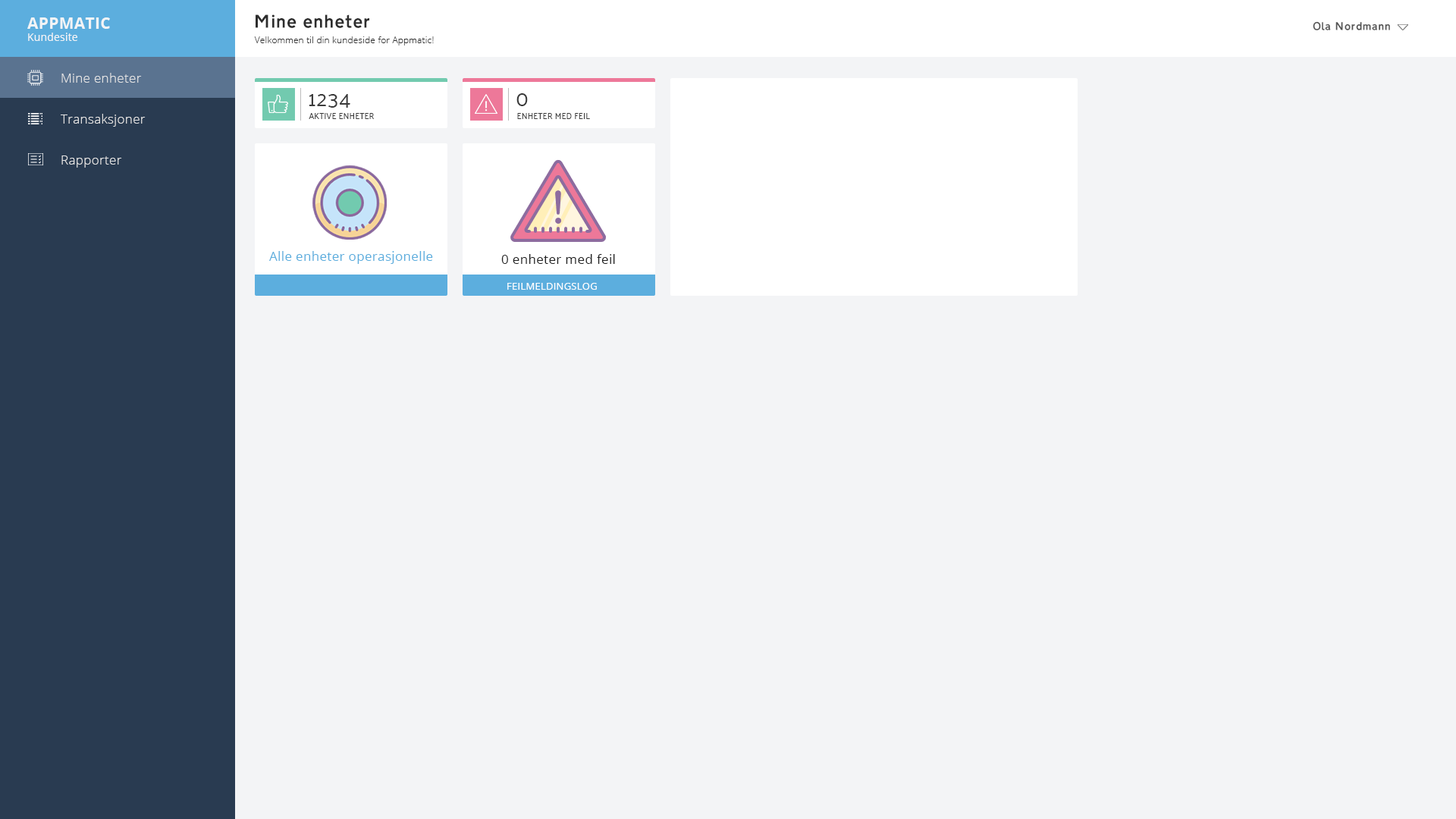
<style>
.page{position:relative;width:1456px;height:819px;background:#f3f4f6}
.page>*{position:absolute;margin:0}
.t1{font:10.5px/11.8px "OpenSans";letter-spacing:0.02em;color:#f3f4f6}
.t2{font:15.8px/11.8px "OpenSans-Bold";letter-spacing:0.02em;color:#f3f4f6}
.t3{font:17.4px "Transport-Medium";letter-spacing:0.02em;color:#2d2d2d}
.t4{font:10.5px "Transport-Medium";letter-spacing:0.02em;color:#535353}
.t5{font:9px "OpenSans-Light";letter-spacing:0.02em;color:#2d2d2d}
.t6{font:12.9px "OpenSans-Light";letter-spacing:0.02em;color:#e5e5e5}
.t7{font:21.2px "Palanquin-Regular";letter-spacing:0.02em;color:#3b3b3b;text-transform:uppercase}
.t8{font:21.2px "Palanquin-Regular";letter-spacing:0.02em;color:#3b3b3b}
.t9{font:8.3px "Palanquin-Regular";letter-spacing:0.02em;color:#3b3b3b;text-transform:uppercase}
.t10{font:12.9px "OpenSans";letter-spacing:0.02em;color:#5caede}
.t11{font:12.9px "OpenSans";letter-spacing:0.02em;color:#232323}
.t12{font:9.9px "OpenSans";letter-spacing:0.02em;color:#ffffff;text-transform:uppercase}
</style>
<div class="page">
<p class="t1" style="left:27px;top:17px;width:83px;height:24px"><span class="t2">APPMATIC<br></span>Kundesite</p>
<p class="t3" style="left:256px;top:14px;width:113px;height:14px">Mine enheter</p>
<p class="t4" style="left:1313px;top:21px;width:77px;height:9px">Ola Nordmann</p>
<p class="t5" style="left:254px;top:36px;width:180px;height:9px">Velkommen til din kundeside for Appmatic!</p>
<p class="t6" style="left:61px;top:73px;width:81px;height:10px">Mine enheter</p>
<p class="t7" style="left:309px;top:94px;width:41px;height:14px">1234</p>
<p class="t8" style="left:516px;top:93px;width:12px;height:13px">0</p>
<p class="t6" style="left:61px;top:114px;width:85px;height:13px">Transaksjoner</p>
<p class="t9" style="left:309px;top:113px;width:66px;height:6px">Aktive enheter</p>
<p class="t9" style="left:517px;top:113px;width:73px;height:6px">enheter med feil</p>
<p class="t6" style="left:61px;top:155px;width:61px;height:13px">Rapporter</p>
<p class="t10" style="left:269px;top:251px;width:164px;height:13px">Alle enheter operasjonelle</p>
<p class="t11" style="left:501px;top:254px;width:114px;height:10px">0 enheter med feil</p>
<p class="t12" style="left:507px;top:283px;width:90px;height:7px">feilmeldingslog</p>
</div>
